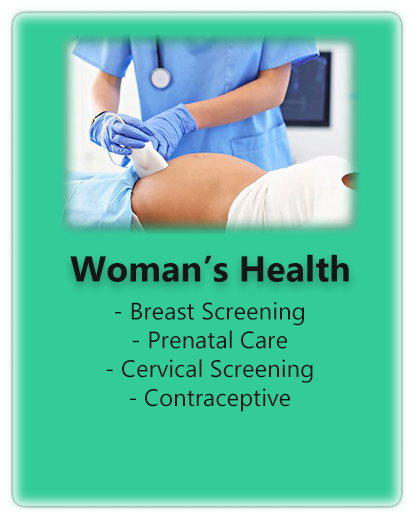
<style>
.page{position:relative;width:420px;height:520px;background:#33cc99}
.page>*{position:absolute;margin:0}
.t1{font:36px "Gadugi-Bold";color:#151515}
.t2{font:24px "Gadugi";color:#151515}
</style>
<div class="page">
<p class="t1" style="left:70px;top:254px;width:279px;height:28px">Woman’s Health</p>
<p class="t2" style="left:106px;top:302px;width:207px;height:110px;text-align:center">- Breast Screening<br>- Prenatal Care<br>- Cervical Screening<br>- Contraceptive</p>
</div>
